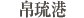
<style>
.page{position:relative;width:84px;height:18px;background:#ffffff}
.page>*{position:absolute;margin:0}
.t1{font:18px "RyuminPro-ExBold";color:#4c4843;scale:0.9 1}
</style>
<div class="page">
<p class="t1" style="left:20px;top:0px;width:47px;height:18px">帛琉港</p>
</div>
